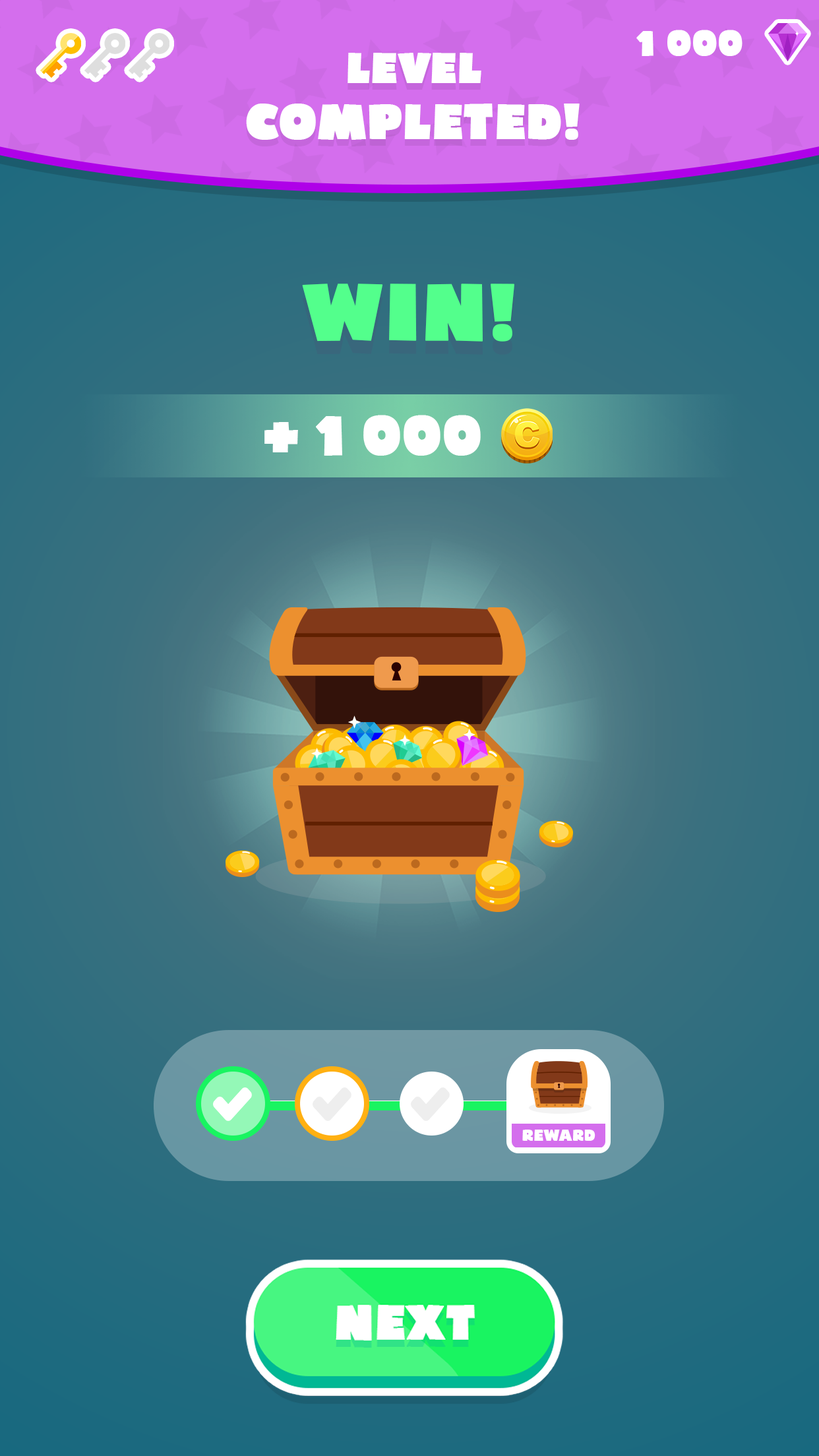
<style>
.page{position:relative;width:819px;height:1456px}
.page>*{position:absolute;margin:0}
.t1{font:33.8px "Bumpo";color:#ffffff;font-weight:bold}
.t2{font:46.8px "Bumpo";color:#ffffff;font-weight:bold}
.t3{font:40.2px "Bumpo";color:#ffffff;font-weight:bold}
.t4{font:75.9px "Bumpo";color:#53ff8c;font-weight:bold}
.t5{font:52.6px "Bumpo";color:#ffffff;font-weight:bold}
.t6{font:15.3px "Bumpo";color:#ffffff}
</style>
<div class="page">
<p class="t1" style="left:636px;top:30px;width:106px;height:26px">1 000</p>
<p class="t2" style="left:246px;top:53px;width:334px;height:87px;text-align:center"><span class="t3">LEVEL <br></span>COMPLETED!</p>
<p class="t4" style="left:302px;top:284px;width:212px;height:58px">WIN!</p>
<p class="t5" style="left:264px;top:415px;width:217px;height:41px">+ 1 000</p>
<p class="t6" style="left:522px;top:1130px;width:73px;height:11px">REWARD</p>
</div>
